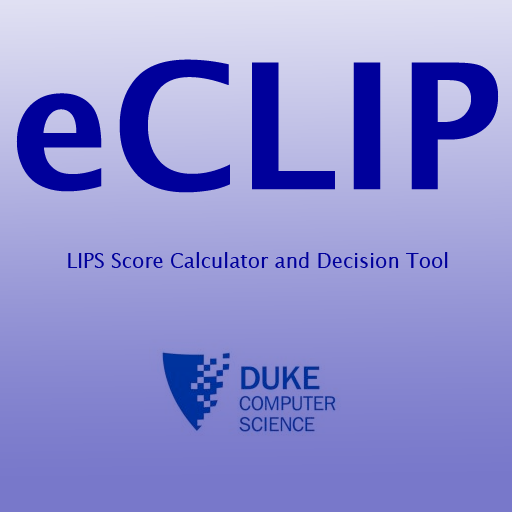
<style>
.page{position:relative;width:512px;height:512px}
.page>*{position:absolute;margin:0}
.t1{font:175px "LucidaSans-Demi";color:#00009c}
.t2{font:20px "LucidaSans";color:#00009c}
</style>
<div class="page">
<p class="t1" style="left:16px;top:59px;width:483px;height:134px">eCLIP</p>
<p class="t2" style="left:68px;top:252px;width:380px;height:16px">LIPS Score Calculator and Decision Tool</p>
</div>
